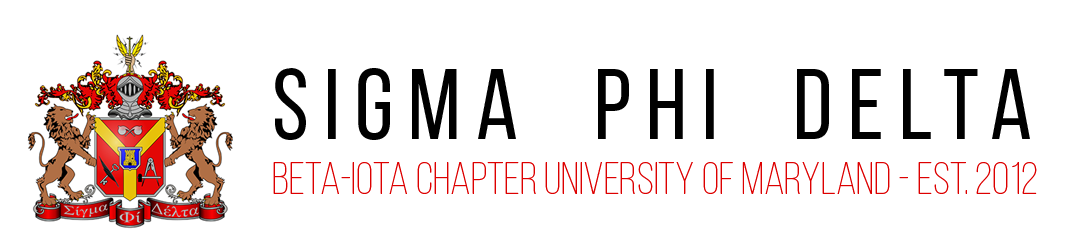
<style>
.page{position:relative;width:1080px;height:239px;background:#ffffff}
.page>*{position:absolute;margin:0}
.t1{font:45.8px "BebasNeueLight";color:#dd0000}
.t2{font:100px "BebasNeueRegular";letter-spacing:0.15em;color:#000000}
</style>
<div class="page">
<p class="t1" style="left:273px;top:68px;width:764px;height:126px"><span class="t2">sigma  phi  delta<br></span>beta-iota chapter university of maryland - est. 2012</p>
</div>
